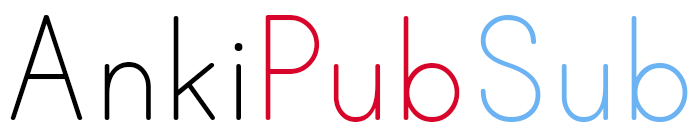
<style>
.page{position:relative;width:698px;height:140px;background:#ffffff}
.page>*{position:absolute;margin:0}
.t1{font:169.6px "PrintClearly";color:#000000}
.t2{font:169.6px "PrintClearly";color:#d9042b}
.t3{font:169.6px "PrintClearly";color:#6bb3f2}
</style>
<div class="page">
<p class="t1" style="left:10px;top:15px;width:678px;height:107px">Anki<span class="t2">Pub</span><span class="t3">Sub</span></p>
</div>
